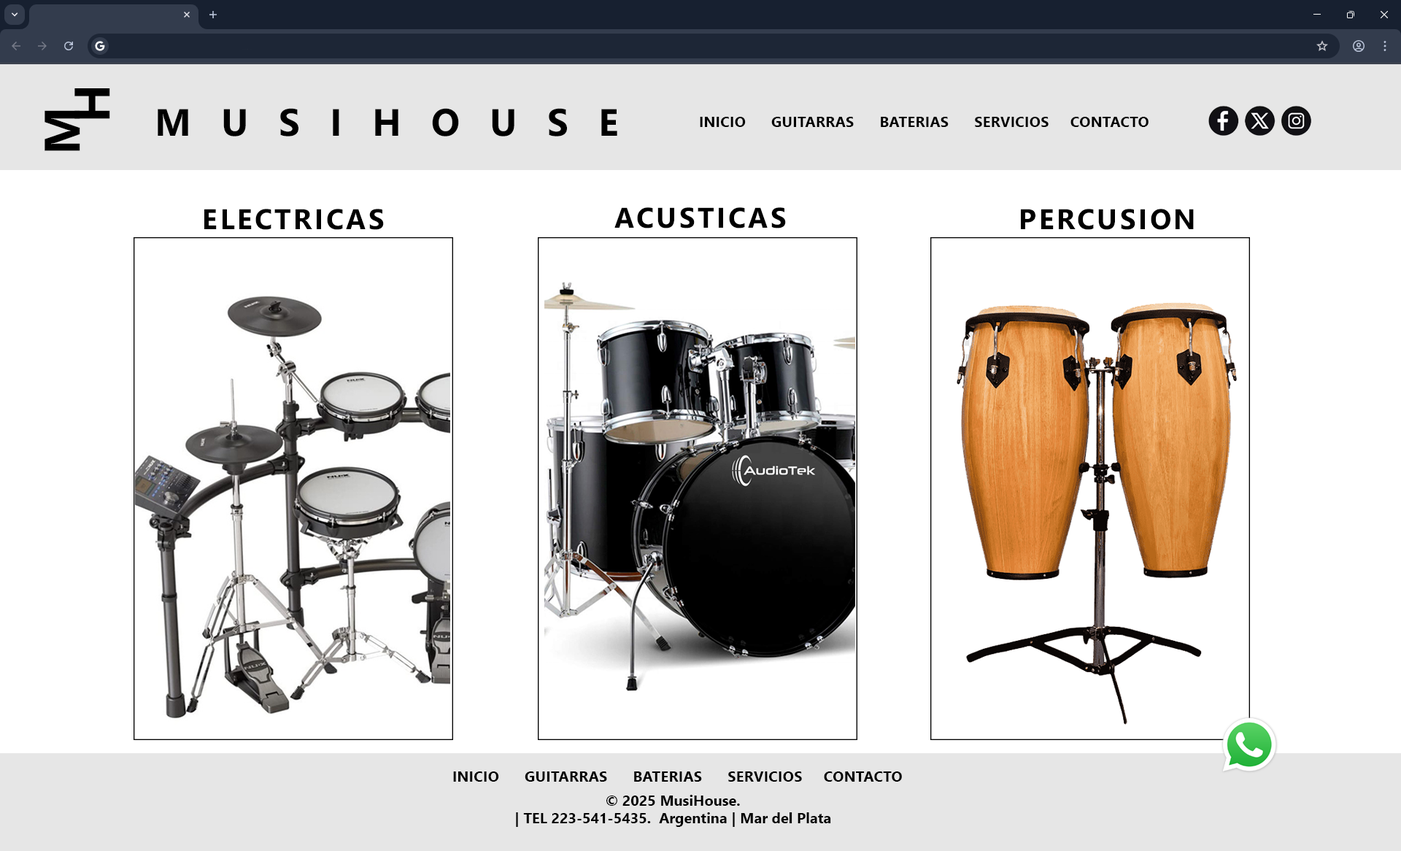
<style>
.page{position:relative;width:1401px;height:851px;background:#ffffff}
.page>*{position:absolute;margin:0}
.t1{font:49.9px/30px "SegoeUI-Bold";letter-spacing:0.8em;color:#000000}
.t2{font:37.9px "SegoeUI-Bold";letter-spacing:0.8em;color:#000000}
.t3{font:14.6px "SegoeUI-Bold";letter-spacing:0.015em;color:#000000}
.t4{font:28.2px "SegoeUI-Bold";letter-spacing:0.09em;color:#000000}
.t5{font:14.6px "SegoeUI-Bold";color:#000000}
</style>
<div class="page">
<p class="t1" style="left:45px;top:88px;width:65px;height:63px;text-align:center;rotate:-90deg">M<br> H</p>
<p class="t2" style="left:158px;top:108px;width:459px;height:28px">MUSIHOUSE</p>
<p class="t3" style="left:700px;top:117px;width:449px;height:10px">INICIO      GUITARRAS      BATERIAS      SERVICIOS     CONTACTO</p>
<p class="t4" style="left:204px;top:209px;width:180px;height:21px">ELECTRICAS</p>
<p class="t4" style="left:615px;top:207px;width:171px;height:21px">ACUSTICAS</p>
<p class="t4" style="left:1021px;top:209px;width:173px;height:21px">PERCUSION</p>
<p class="t3" style="left:453px;top:771px;width:449px;height:11px">INICIO      GUITARRAS      BATERIAS      SERVICIOS     CONTACTO</p>
<p class="t5" style="left:516px;top:795px;width:315px;height:32px;text-align:center">© 2025 MusiHouse.<br>| TEL 223-541-5435.  Argentina | Mar del Plata</p>
</div>
